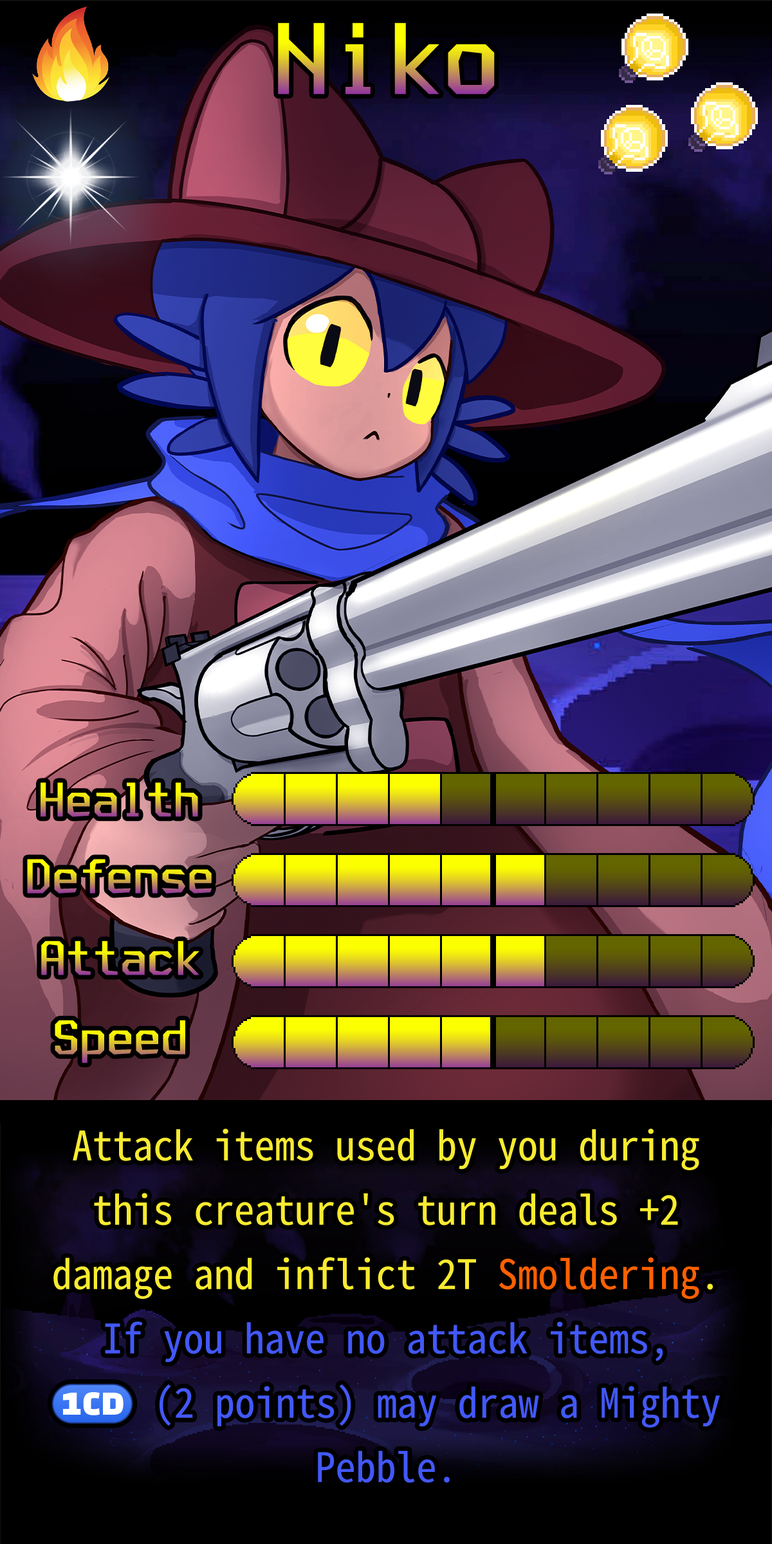
<style>
.page{position:relative;width:772px;height:1544px}
.page>*{position:absolute;margin:0}
.t1{font:194.3px "TerminusTTF-Bold"}
.t2{font:92.7px "TerminusTTF-Bold"}
.t3{font:69.5px/64.3px "SourceHanSansHWSC-Regular";color:#f8eb30}
.t4{font:69.5px/64.3px "SourceHanSansHWSC-Regular";color:#ff6000}
.t5{font:69.5px/64.3px "SourceHanSansHWSC-Regular";color:#4258f9}
.t6{font:69.5px/64.3px "stoogedings-Regular";letter-spacing:0.5em;color:#4258f9}
</style>
<div class="page">
<p class="t1" style="left:278px;top:23px;width:217px;height:72px">Niko</p>
<p class="t2" style="left:41px;top:782px;width:157px;height:35px">Health</p>
<p class="t2" style="left:27px;top:859px;width:185px;height:35px">Defense</p>
<p class="t2" style="left:41px;top:941px;width:158px;height:34px">Attack</p>
<p class="t2" style="left:55px;top:1021px;width:130px;height:42px">Speed</p>
<p class="t3" style="left:51px;top:1129px;width:669px;height:354px;text-align:center">Attack items used by you during this creature's turn deals +2 damage and inflict 2T <span class="t4">Smoldering</span>.<br><span class="t5">If you have no attack items, </span><span class="t6">(1CD)</span><span class="t5">(2 points) may draw a Mighty Pebble.</span></p>
</div>
